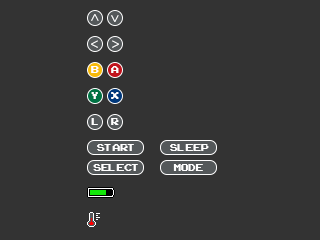
<style>
.page{position:relative;width:320px;height:240px;background:#333333}
.page>*{position:absolute;margin:0}
.t1{font:14px "MyriadPro-Regular";color:#ffffff}
.t2{font:14px "ArcadeClassic";color:#ffffff}
.t3{font:14px "ArcadeClassic";color:#ffffff;scale:0.95 1}
</style>
<div class="page">
<p class="t1" style="left:91px;top:14px;width:8px;height:7px;rotate:90deg">&lt;</p>
<p class="t1" style="left:111px;top:15px;width:8px;height:7px;rotate:90deg">&gt;</p>
<p class="t1" style="left:91px;top:40px;width:7px;height:8px">&lt;</p>
<p class="t1" style="left:112px;top:40px;width:7px;height:8px">&gt;</p>
<p class="t2" style="left:91px;top:66px;width:8px;height:7px">B</p>
<p class="t2" style="left:111px;top:66px;width:8px;height:7px">A</p>
<p class="t2" style="left:91px;top:92px;width:7px;height:7px">Y</p>
<p class="t2" style="left:111px;top:92px;width:8px;height:7px">X</p>
<p class="t2" style="left:91px;top:118px;width:7px;height:7px">L</p>
<p class="t2" style="left:111px;top:118px;width:8px;height:7px">R</p>
<p class="t2" style="left:97px;top:144px;width:37px;height:7px">START</p>
<p class="t2" style="left:170px;top:144px;width:39px;height:7px">SLEEP</p>
<p class="t2" style="left:93px;top:164px;width:45px;height:7px">SELECT</p>
<p class="t3" style="left:173px;top:164px;width:30px;height:7px">MODE</p>
</div>
